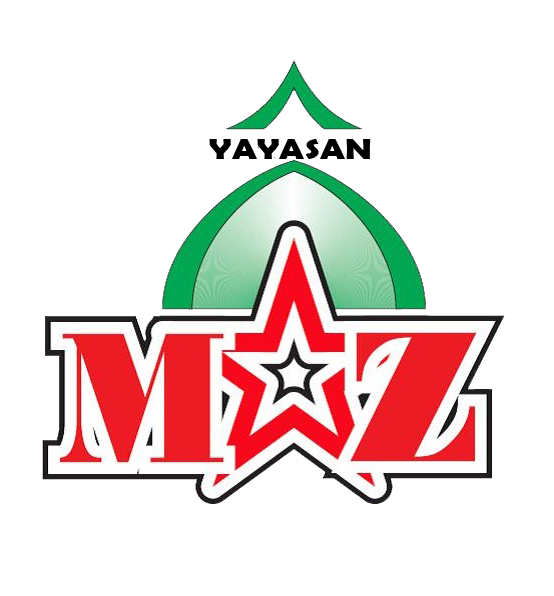
<style>
.page{position:relative;width:554px;height:596px;background:#ffffff}
.page>*{position:absolute;margin:0}
.t1{font:28.7px "BerlinSansFBDemi-Bold";color:#000000;scale:1.27 1}
</style>
<div class="page">
<p class="t1" style="left:209px;top:139px;width:162px;height:20px">YAYASAN</p>
</div>
